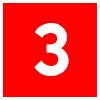
<style>
.page{position:relative;width:100px;height:100px;background:#ff0000}
.page>*{position:absolute;margin:0}
.t1{font:72px "ELEGANCE";color:#ffffff}
</style>
<div class="page">
<p class="t1" style="left:34px;top:23px;width:35px;height:53px">3</p>
</div>
